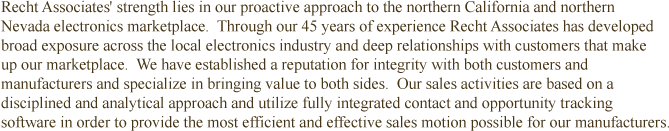
<style>
.page{position:relative;width:669px;height:131px;background:#ffffff}
.page>*{position:absolute;margin:0}
.t1{font:16px "TimesNewRomanPSMT";color:#463517}
</style>
<div class="page">
<p class="t1" style="left:0px;top:0px;width:669px;height:131px">Recht Associates' strength lies in our proactive approach to the northern California and northern <br>Nevada electronics marketplace.  Through our 45 years of experience Recht Associates has developed <br>broad exposure across the local electronics industry and deep relationships with customers that make <br>up our marketplace.  We have established a reputation for integrity with both customers and <br>manufacturers and specialize in bringing value to both sides.  Our sales activities are based on a <br>disciplined and analytical approach and utilize fully integrated contact and opportunity tracking <br>software in order to provide the most efficient and effective sales motion possible for our manufacturers.</p>
</div>
